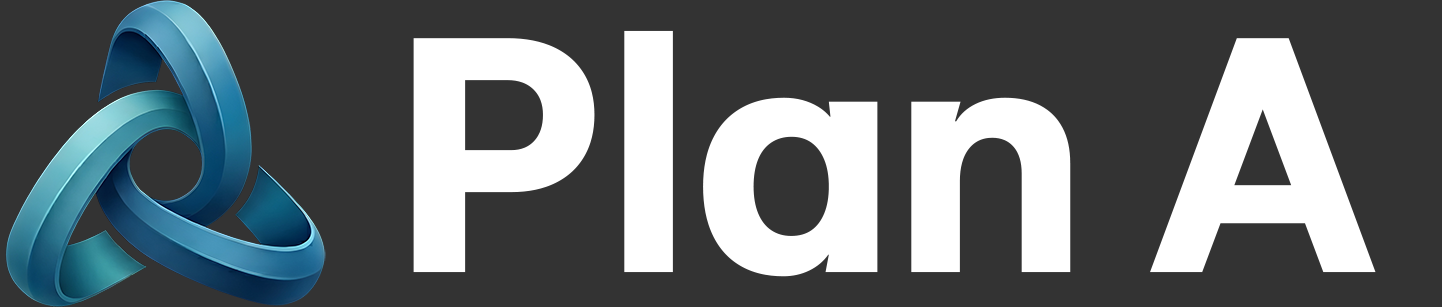
<style>
.page{position:relative;width:1442px;height:307px;background:#333333}
.page>*{position:absolute;margin:0}
.t1{font:327.5px "Pliant-SemiBold";color:#ffffff}
</style>
<div class="page">
<p class="t1" style="left:413px;top:30px;width:963px;height:247px">Plan A</p>
</div>
